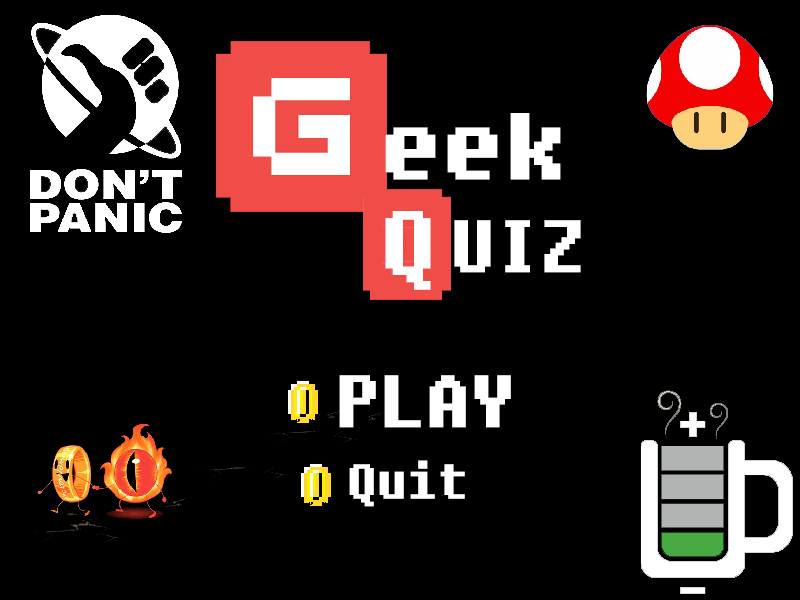
<style>
.page{position:relative;width:800px;height:600px;background:#000000}
.page>*{position:absolute;margin:0}
.t1{font:92.5px "Fixedsys";color:#ffffff;font-weight:bold;scale:1.07 1}
.t2{font:72px "Fixedsys";color:#ffffff;font-weight:bold}
.t3{font:48px "Fixedsys";color:#ffffff;font-weight:bold}
</style>
<div class="page">
<p class="t1" style="left:385px;top:113px;width:176px;height:67px">eek</p>
<p class="t2" style="left:454px;top:220px;width:127px;height:53px">UIZ</p>
<p class="t2" style="left:339px;top:375px;width:172px;height:53px">PLAY</p>
<p class="t3" style="left:349px;top:460px;width:116px;height:47px">Quit</p>
</div>
